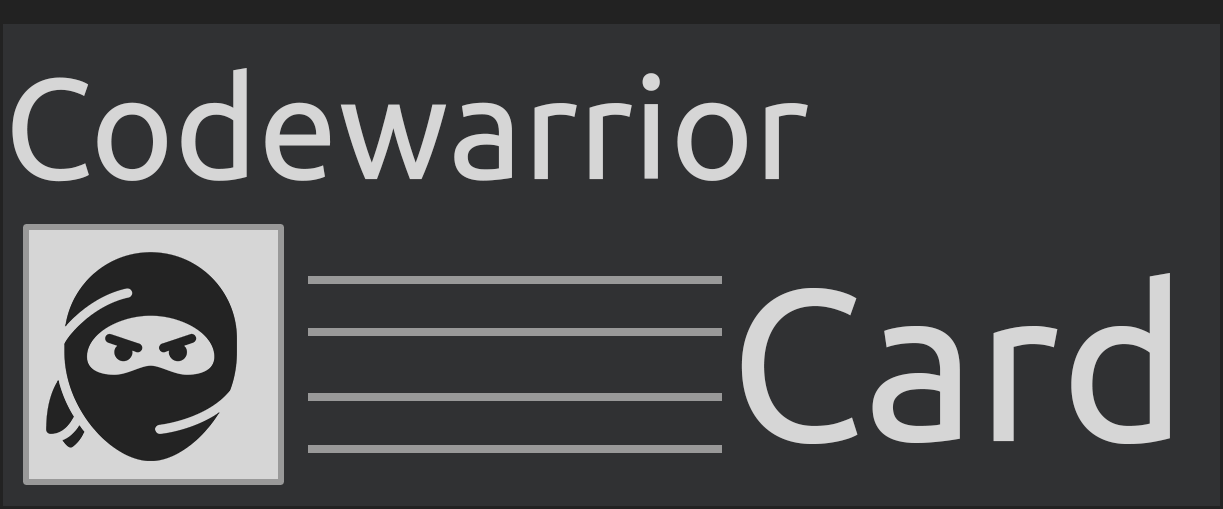
<style>
.page{position:relative;width:1223px;height:509px;background:#303133}
.page>*{position:absolute;margin:0}
.t1{font:142.9px "Ubuntu-Regular";color:#d6d6d6}
.t2{font:216.3px "Ubuntu-Regular";color:#d6d6d6}
</style>
<div class="page">
<p class="t1" style="left:12px;top:68px;width:796px;height:114px">Codewarrior</p>
<p class="t2" style="left:741px;top:272px;width:429px;height:172px">Card</p>
</div>
